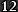
<style>
.page{position:relative;width:18px;height:12px;background:#333333}
.page>*{position:absolute;margin:0}
.t1{font:17px "Perpetua-Bold";color:#ffffff}
</style>
<div class="page">
<p class="t1" style="left:2px;top:1px;width:15px;height:10px">12</p>
</div>
